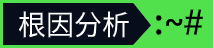
<style>
.page{position:relative;width:214px;height:48px;background:#080d1b}
.page>*{position:absolute;margin:0}
.t1{font:28px "SourceHanSansSC-Regular";color:#ffffff}
</style>
<div class="page">
<p class="t1" style="left:19px;top:11px;width:110px;height:27px">根因分析</p>
</div>
